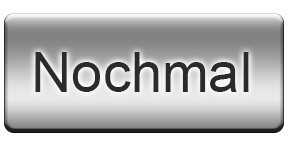
<style>
.page{position:relative;width:288px;height:144px;background:#ffffff}
.page>*{position:absolute;margin:0}
.t1{font:56px "ArialMT";color:#2b2b2b}
</style>
<div class="page">
<p class="t1" style="left:35px;top:52px;width:214px;height:40px">Nochmal</p>
</div>
